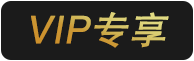
<style>
.page{position:relative;width:194px;height:61px;background:#1b1b1b}
.page>*{position:absolute;margin:0}
.t1{font:37.9px "FZHTJW--GB1-0";font-weight:bold;font-style:italic}
</style>
<div class="page">
<p class="t1" style="left:31px;top:12px;width:138px;height:36px">VIP专享</p>
</div>
